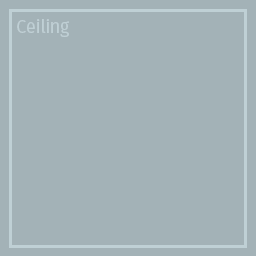
<style>
.page{position:relative;width:256px;height:256px;background:#a3b2b7}
.page>*{position:absolute;margin:0}
.t1{font:18px "FiraSans-Regular";letter-spacing:-0.02em;color:#bfd0d5}
</style>
<div class="page">
<p class="t1" style="left:17px;top:19px;width:52px;height:18px">Ceiling</p>
</div>
